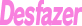
<style>
.page{position:relative;width:82px;height:26px;background:#f880de}
.page>*{position:absolute;margin:0}
.t1{font:32px "RodinPro-EB";letter-spacing:-0.051em;color:#f880de;font-style:italic;scale:0.61 1}
</style>
<div class="page">
<p class="t1" style="left:0px;top:0px;width:83px;height:26px">Desfazer</p>
</div>
